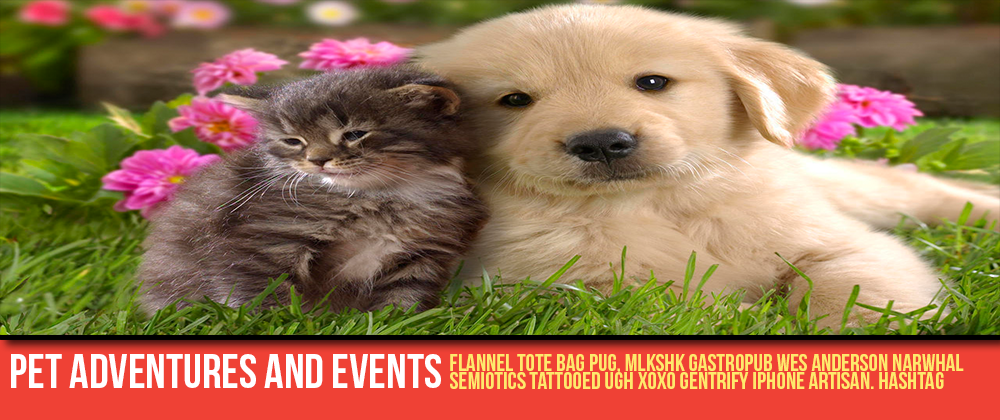
<style>
.page{position:relative;width:1000px;height:420px}
.page>*{position:absolute;margin:0}
.t1{font:48px "BebasNeue";color:#ffffff}
.t2{font:24px/18px "BebasNeue";color:#fee96c}
</style>
<div class="page">
<p class="t1" style="left:11px;top:354px;width:430px;height:34px">PET adventures and events</p>
<p class="t2" style="left:450px;top:354px;width:514px;height:35px;text-align:right">Flannel tote bag pug, mlkshk gastropub Wes Anderson narwhal <br>semiotics tattooed ugh XOXO gentrify iPhone artisan. Hashtag</p>
</div>
